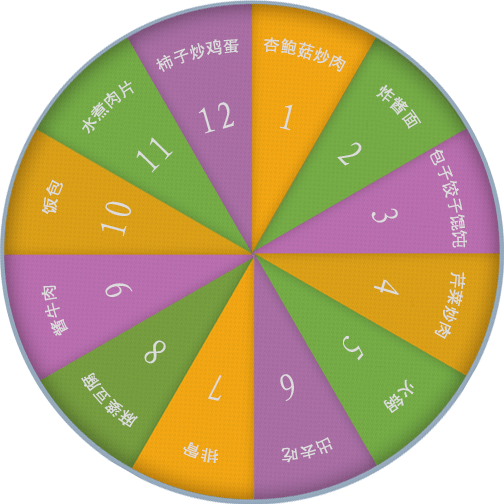
<style>
.page{position:relative;width:504px;height:504px;background:#ffffff}
.page>*{position:absolute;margin:0}
.t1{font:16px "AdobeHeitiStd-Regular";color:#dcdcdc}
.t2{font:38px "RS_TeCuHei";color:#dcdcdc}
</style>
<div class="page">
<p class="t1" style="left:156px;top:39px;width:83px;height:33px;rotate:-15deg">柿子炒鸡蛋</p>
<p class="t1" style="left:263px;top:37px;width:83px;height:35px;rotate:15deg">杏鲍菇炒肉</p>
<p class="t1" style="left:82px;top:80px;width:52px;height:54px;rotate:-44deg">水煮肉片</p>
<p class="t1" style="left:376px;top:84px;width:46px;height:45px;rotate:46deg">炸酱面</p>
<p class="t2" style="left:198px;top:102px;width:36px;height:32px;rotate:-16deg">12</p>
<p class="t2" style="left:280px;top:104px;width:13px;height:27px;rotate:14deg">1</p>
<p class="t2" style="left:136px;top:137px;width:37px;height:36px;rotate:-46deg">11</p>
<p class="t2" style="left:337px;top:142px;width:25px;height:24px;rotate:46deg">2</p>
<p class="t1" style="left:430px;top:149px;width:37px;height:99px;rotate:75deg">包子饺子馄饨</p>
<p class="t1" style="left:41px;top:179px;width:22px;height:35px;rotate:-76deg">饭包</p>
<p class="t2" style="left:100px;top:201px;width:31px;height:36px;rotate:-75deg">10</p>
<p class="t2" style="left:371px;top:208px;width:27px;height:15px;rotate:77deg">3</p>
<p class="t2" style="left:374px;top:279px;width:25px;height:16px;rotate:106deg">4</p>
<p class="t1" style="left:434px;top:272px;width:32px;height:67px;rotate:106deg">芹菜炒肉</p>
<p class="t1" style="left:41px;top:285px;width:28px;height:51px;rotate:-106deg">酱牛肉</p>
<p class="t2" style="left:105px;top:283px;width:28px;height:14px;rotate:-106deg">9</p>
<p class="t2" style="left:144px;top:340px;width:22px;height:24px;rotate:-140deg">8</p>
<p class="t2" style="left:343px;top:336px;width:21px;height:25px;rotate:130deg">5</p>
<p class="t1" style="left:81px;top:372px;width:57px;height:56px;rotate:-135deg">麻婆豆腐</p>
<p class="t2" style="left:208px;top:375px;width:14px;height:26px;rotate:-168deg">7</p>
<p class="t2" style="left:280px;top:374px;width:14px;height:27px;rotate:164deg">6</p>
<p class="t1" style="left:383px;top:379px;width:31px;height:34px;rotate:135deg">火锅</p>
<p class="t1" style="left:281px;top:437px;width:52px;height:26px;rotate:166deg">出去吃</p>
<p class="t1" style="left:183px;top:442px;width:36px;height:21px;rotate:-165deg">排骨</p>
</div>
